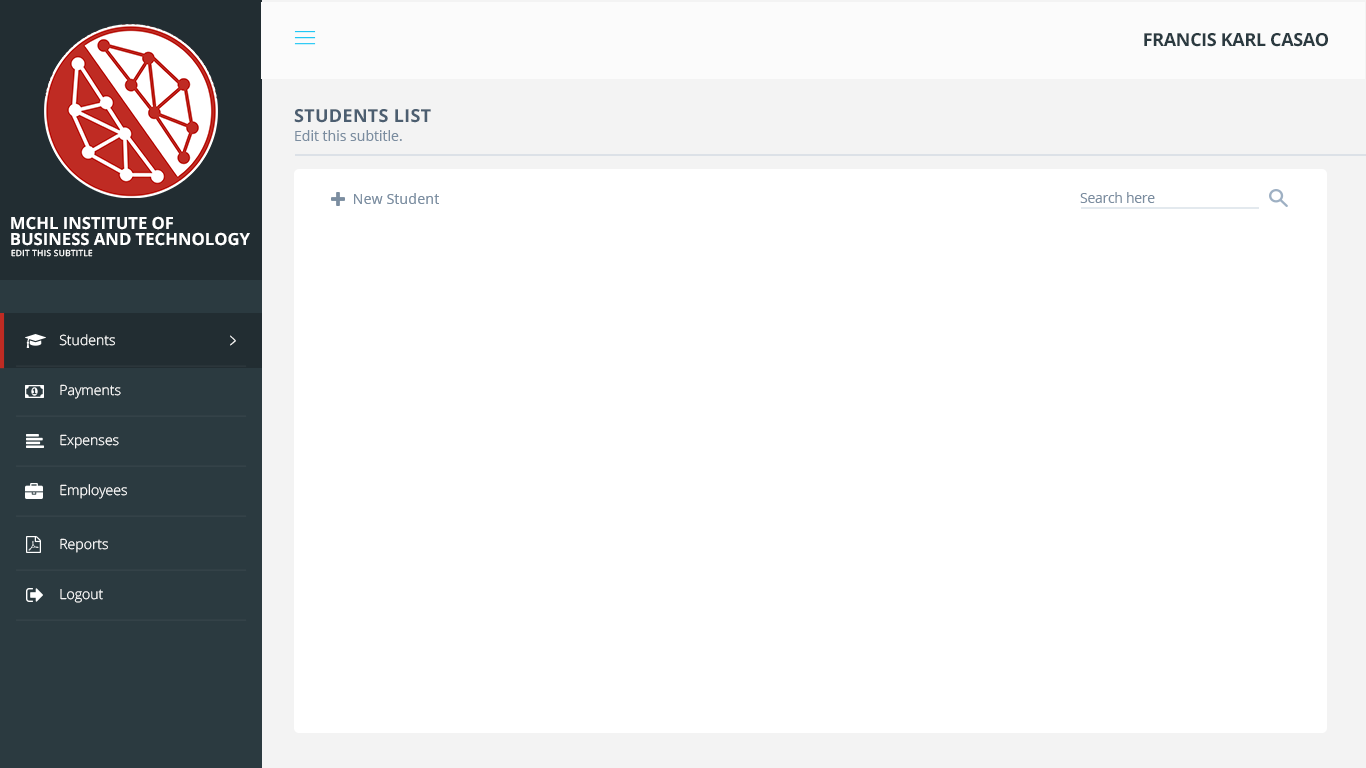
<style>
.page{position:relative;width:1366px;height:768px;background:#ffffff}
.page>*{position:absolute;margin:0}
.t1{font:18px "OpenSans-Bold";letter-spacing:-0.02em;color:#2b3a40;text-transform:uppercase}
.t2{font:18.1px "OpenSans-Bold";letter-spacing:0.015em;color:#4c5e70;text-transform:uppercase}
.t3{font:14.1px "OpenSans";color:#7b8da0}
.t4{font:14px "OpenSans";color:#7b8da0}
.t5{font:14px "OpenSans";letter-spacing:-0.02em;color:#7b8da0}
.t6{font:16.7px/16px "OpenSans-Bold";color:#ffffff;text-transform:uppercase}
.t7{font:8.3px "OpenSans";letter-spacing:0.04em;color:#ffffff;text-transform:uppercase}
.t8{font:14.1px "OpenSans-Light";color:#ffffff}
.t9{font:20.7px "OpenSans-Light";color:#ffffff;scale:0.52 1}
</style>
<div class="page">
<p class="t1" style="left:1144px;top:33px;width:184px;height:14px">Francis Karl Casao</p>
<p class="t2" style="left:294px;top:109px;width:137px;height:14px">Students List</p>
<p class="t3" style="left:295px;top:130px;width:107px;height:11px">Edit this subtitle.</p>
<p class="t4" style="left:354px;top:193px;width:85px;height:11px">New Student</p>
<p class="t5" style="left:1080px;top:192px;width:75px;height:11px">Search here</p>
<p class="t6" style="left:11px;top:216px;width:239px;height:30px">Mchl Institute of<br>business and technology</p>
<p class="t7" style="left:11px;top:249px;width:82px;height:8px">Edit this subtitle</p>
<p class="t8" style="left:59px;top:334px;width:56px;height:12px">Students</p>
<p class="t9" style="left:230px;top:335px;width:6px;height:11px">&gt;</p>
<p class="t8" style="left:60px;top:384px;width:61px;height:15px">Payments</p>
<p class="t8" style="left:60px;top:434px;width:59px;height:15px">Expenses</p>
<p class="t8" style="left:60px;top:484px;width:67px;height:15px">Employees</p>
<p class="t8" style="left:60px;top:538px;width:48px;height:15px">Reports</p>
<p class="t8" style="left:60px;top:589px;width:43px;height:14px">Logout</p>
</div>
